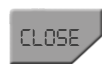
<style>
.page{position:relative;width:110px;height:72px;background:#9f9e9e}
.page>*{position:absolute;margin:0}
.t1{font:26px "DS-Digital";letter-spacing:-0.025em;color:#404040}
</style>
<div class="page">
<p class="t1" style="left:20px;top:29px;width:60px;height:17px">close</p>
</div>
